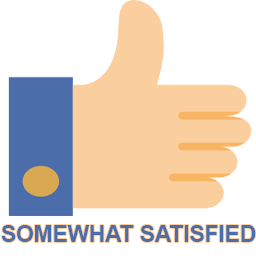
<style>
.page{position:relative;width:256px;height:256px;background:#ffffff}
.page>*{position:absolute;margin:0}
.t1{font:22.6px "Arial-BoldMT";color:#4b6daa}
</style>
<div class="page">
<p class="t1" style="left:1px;top:225px;width:255px;height:17px">SOMEWHAT SATISFIED</p>
</div>
